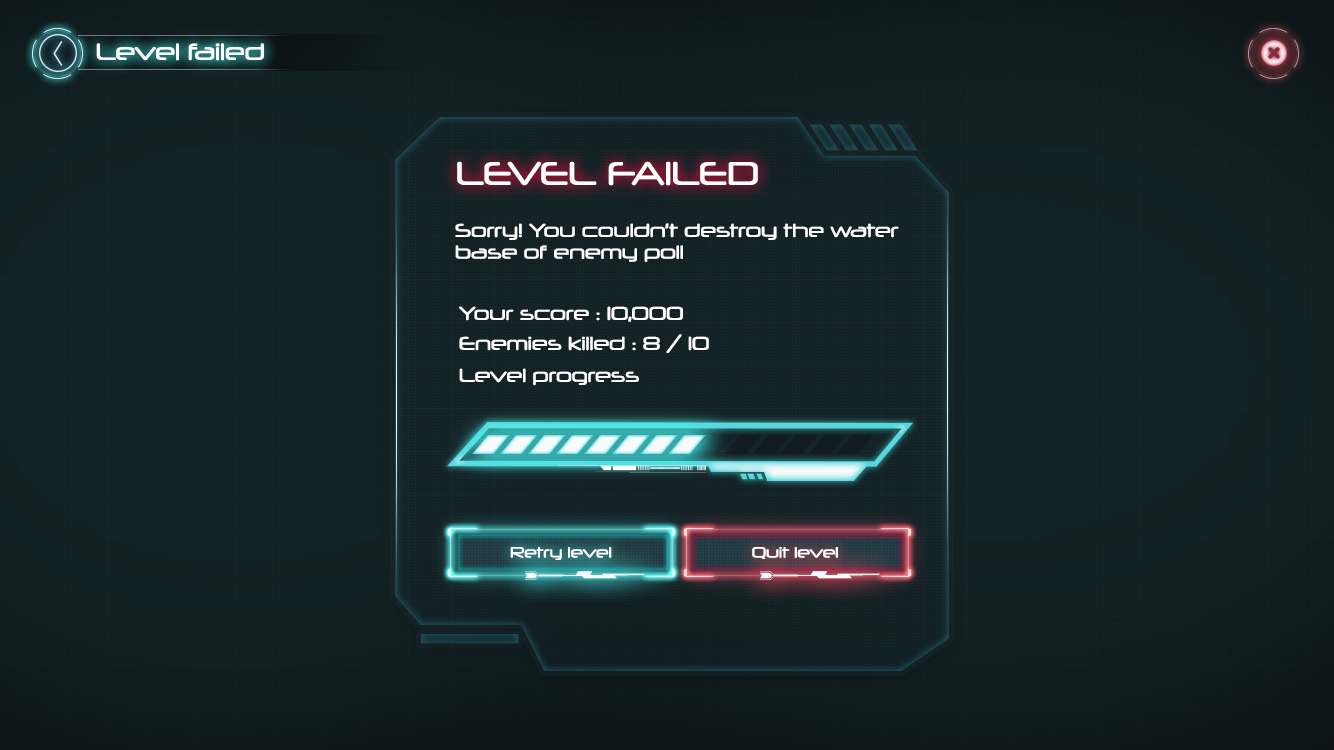
<style>
.page{position:relative;width:1334px;height:750px}
.page>*{position:absolute;margin:0}
.t1{font:22.6px "Neuropol-Regular";color:#ffffff}
.t2{font:31.7px "Neuropol-Regular";color:#ffffff}
.t3{font:18.1px "Neuropol-Regular";color:#ffffff}
.t4{font:14.5px "Neuropol-Regular";color:#ffffff}
</style>
<div class="page">
<p class="t1" style="left:96px;top:43px;width:168px;height:18px">Level failed</p>
<p class="t2" style="left:457px;top:161px;width:301px;height:25px">LEVEL FAILED</p>
<p class="t3" style="left:455px;top:223px;width:444px;height:39px">Sorry! You couldn’t destroy the water<br>base of enemy poll</p>
<p class="t3" style="left:459px;top:306px;width:224px;height:16px">Your score : 10,000</p>
<p class="t3" style="left:459px;top:334px;width:250px;height:19px">Enemies killed : 8 / 10</p>
<p class="t3" style="left:459px;top:368px;width:180px;height:18px">Level progress</p>
<p class="t4" style="left:510px;top:547px;width:102px;height:13px">Retry level</p>
<p class="t4" style="left:752px;top:547px;width:86px;height:12px">Quit level</p>
</div>
